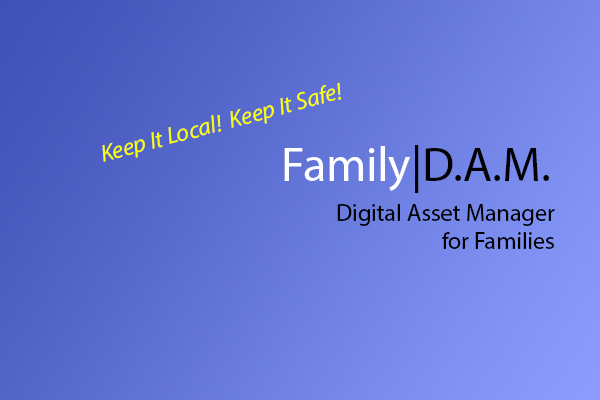
<style>
.page{position:relative;width:600px;height:400px}
.page>*{position:absolute;margin:0}
.t1{font:24px "MyriadPro-It";color:#fcff00}
.t2{font:48px "MyriadPro-Regular";color:#010101}
.t3{font:48px "MyriadPro-Regular";color:#ffffff}
.t4{font:24px "MyriadPro-Regular";color:#000000}
</style>
<div class="page">
<p class="t1" style="left:102px;top:82px;width:240px;height:80px;rotate:-15deg">Keep It Local!  Keep It Safe!</p>
<p class="t2" style="left:284px;top:145px;width:265px;height:48px"><span class="t3">Family</span>|D.A.M.</p>
<p class="t4" style="left:337px;top:204px;width:218px;height:45px;text-align:right">Digital Asset Manager <br>for Families</p>
</div>
